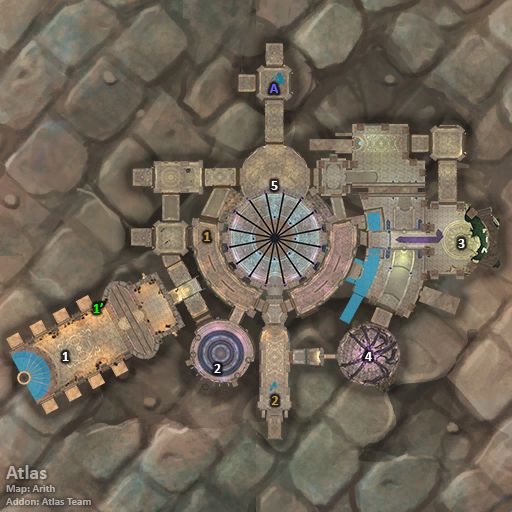
<style>
.page{position:relative;width:512px;height:512px}
.page>*{position:absolute;margin:0}
.t1{font:14px "Calibri-Bold";color:#6666ff}
.t2{font:14px "Calibri-Bold";color:#ffffff}
.t3{font:14px "Calibri-Bold";color:#cc9933}
.t4{font:14px "Calibri-Bold";color:#00ff00}
.t5{font:11px "Calibri-Bold";color:#b3aca6}
.t6{font:20px "Calibri-Bold";color:#b3aca6}
</style>
<div class="page">
<p class="t1" style="left:269px;top:84px;width:9px;height:9px">A</p>
<p class="t2" style="left:271px;top:181px;width:7px;height:9px">5</p>
<p class="t3" style="left:204px;top:232px;width:6px;height:9px">1</p>
<p class="t2" style="left:458px;top:239px;width:7px;height:9px">3</p>
<p class="t4" style="left:93px;top:303px;width:10px;height:10px">1’</p>
<p class="t2" style="left:62px;top:352px;width:7px;height:9px">1</p>
<p class="t2" style="left:365px;top:352px;width:7px;height:9px">4</p>
<p class="t2" style="left:214px;top:364px;width:7px;height:9px">2</p>
<p class="t3" style="left:272px;top:396px;width:7px;height:9px">2</p>
<p class="t5" style="left:6px;top:465px;width:85px;height:40px"><span class="t6">Atlas<br></span>Map: Arith<br>Addon: Atlas Team</p>
</div>
